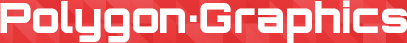
<style>
.page{position:relative;width:407px;height:43px;background:#ffffff}
.page>*{position:absolute;margin:0}
.t1{font:42px "Orbitron-Black";color:#ffffff}
.t2{font:42px "Orbitron-Black";letter-spacing:0.01em;color:#ffffff}
</style>
<div class="page">
<p class="t1" style="left:0px;top:0px;width:407px;height:43px">Polygon<span class="t2">.</span>Graphics</p>
</div>
